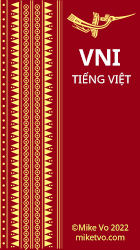
<style>
.page{position:relative;width:140px;height:250px;background:#970015}
.page>*{position:absolute;margin:0}
.t1{font:22.7px "NotoSans-Bold";color:#ffffff}
.t2{font:11.2px "NotoSans";color:#ffffff}
.t3{font:8.2px "NotoSans";color:#fff47d}
</style>
<div class="page">
<p class="t1" style="left:79px;top:49px;width:41px;height:17px">VNI</p>
<p class="t2" style="left:72px;top:72px;width:59px;height:14px">TIẾNG VIỆT</p>
<p class="t3" style="left:72px;top:224px;width:57px;height:17px;text-align:center">©Mike Vo 2022<br>miketvo.com</p>
</div>
